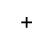
<style>
.page{position:relative;width:53px;height:41px;background:#ffffff}
.page>*{position:absolute;margin:0}
.t1{font:23.7px "DroidSans";color:#000000}
</style>
<div class="page">
<p class="t1" style="left:21px;top:17px;width:11px;height:11px">+</p>
</div>
